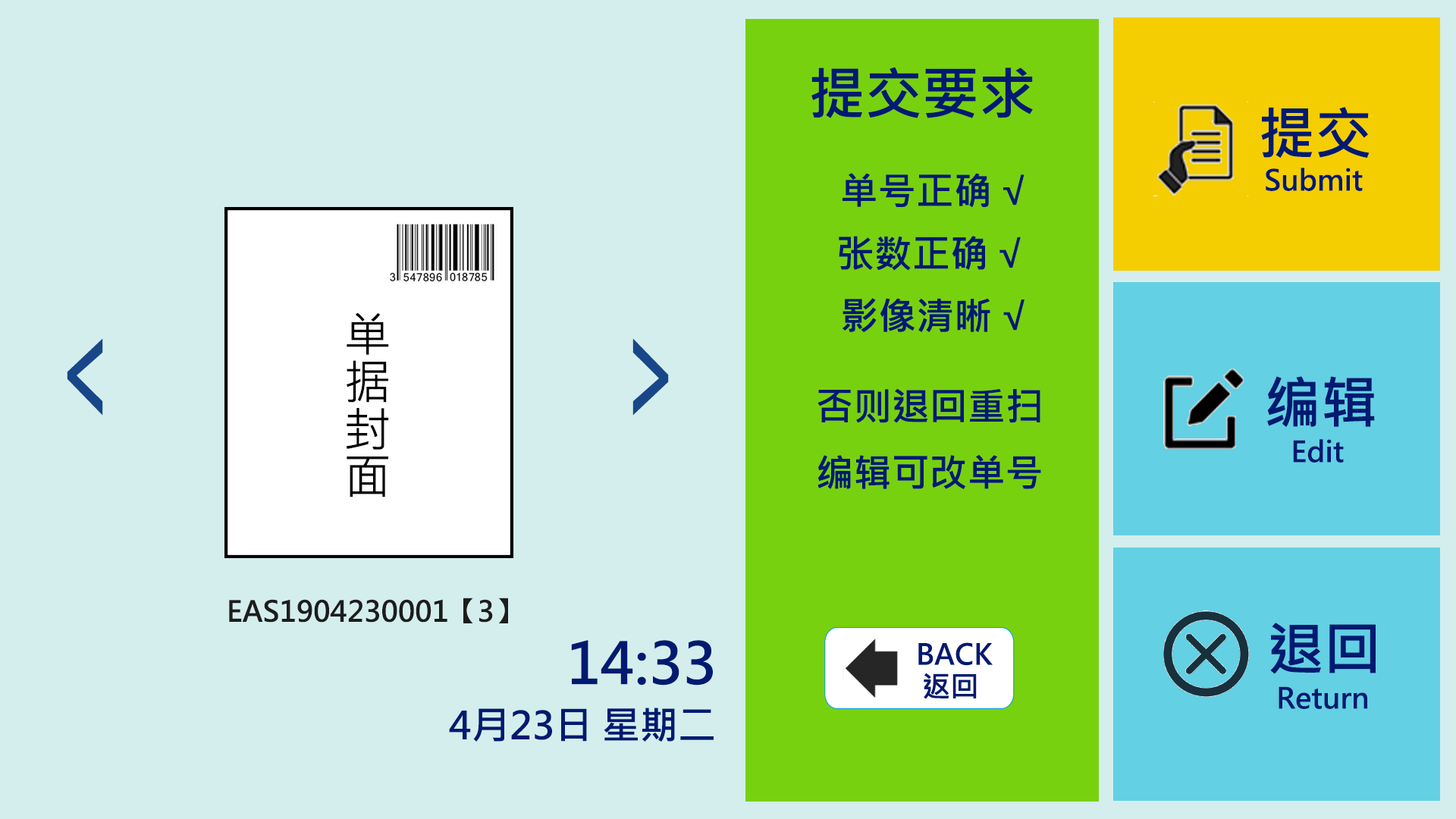
<style>
.page{position:relative;width:1456px;height:819px;background:#d4eeee}
.page>*{position:absolute;margin:0}
.t1{font:56.9px "MicrosoftJhengHeiBold";color:#001a71}
.t2{font:37.9px "MicrosoftJhengHeiBold";color:#001a71}
.t3{font:28.4px "MicrosoftJhengHeiBold";color:#001a71}
.t4{font:146.2px "MicrosoftJhengHeiBold";color:#18468a;scale:0.52 1}
.t5{font:28.4px "MicrosoftJhengHeiBold";color:#1e1c1c}
</style>
<div class="page">
<p class="t1" style="left:811px;top:67px;width:222px;height:51px">提交要求</p>
<p class="t1" style="left:1261px;top:107px;width:109px;height:51px">提交</p>
<p class="t2" style="left:842px;top:173px;width:182px;height:35px">单号正确 √</p>
<p class="t3" style="left:1266px;top:168px;width:97px;height:23px">Submit</p>
<p class="t2" style="left:839px;top:236px;width:182px;height:35px">张数正确 √</p>
<p class="t2" style="left:842px;top:298px;width:182px;height:35px">影像清晰 √</p>
<p class="t4" style="left:67px;top:338px;width:36px;height:78px;rotate:180deg">＞</p>
<p class="t4" style="left:632px;top:338px;width:37px;height:78px">＞</p>
<p class="t1" style="left:1267px;top:376px;width:108px;height:51px">编辑</p>
<p class="t2" style="left:817px;top:388px;width:224px;height:101px;text-align:center">否则退回重扫<br>编辑可改单号</p>
<p class="t3" style="left:1293px;top:439px;width:51px;height:24px">Edit</p>
<p class="t5" style="left:229px;top:598px;width:279px;height:25px">EAS1904230001【3】</p>
<p class="t1" style="left:1270px;top:623px;width:106px;height:51px">退回</p>
<p class="t1" style="left:571px;top:640px;width:142px;height:46px">14:33</p>
<p class="t3" style="left:918px;top:642px;width:75px;height:24px">BACK</p>
<p class="t3" style="left:924px;top:673px;width:53px;height:26px">返回</p>
<p class="t3" style="left:1279px;top:686px;width:88px;height:23px">Return</p>
<p class="t2" style="left:449px;top:708px;width:265px;height:34px">4月23日 星期二</p>
</div>
